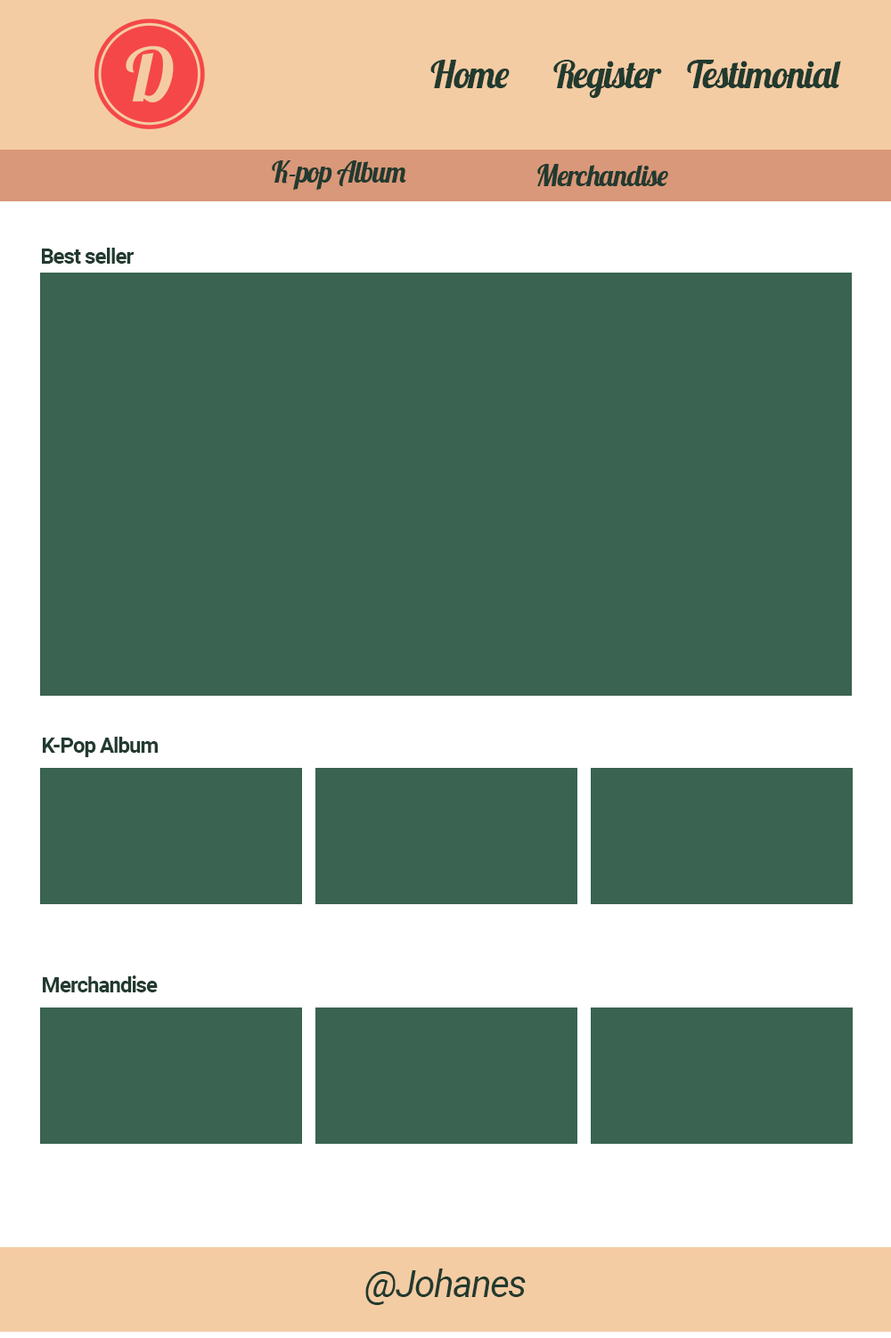
<style>
.page{position:relative;width:891px;height:1338px;background:#3a6351}
.page>*{position:absolute;margin:0}
.t1{font:37.4px "Lobster-Regular";letter-spacing:-0.04em;color:#223a2f}
.t2{font:28.7px "Lobster-Regular";letter-spacing:-0.04em;color:#223a2f}
.t3{font:21.4px "Roboto-Bold";letter-spacing:-0.04em;color:#223a2f}
.t4{font:37.4px "Roboto-Italic";letter-spacing:-0.04em;color:#223a2f}
</style>
<div class="page">
<p class="t1" style="left:430px;top:60px;width:80px;height:28px">Home</p>
<p class="t1" style="left:553px;top:60px;width:109px;height:38px">Register</p>
<p class="t1" style="left:687px;top:60px;width:154px;height:28px">Testimonial</p>
<p class="t2" style="left:272px;top:160px;width:134px;height:30px">K-pop Album</p>
<p class="t2" style="left:537px;top:164px;width:131px;height:22px">Merchandise</p>
<p class="t3" style="left:42px;top:248px;width:92px;height:16px">Best seller</p>
<p class="t3" style="left:43px;top:737px;width:115px;height:20px">K-Pop Album</p>
<p class="t3" style="left:43px;top:976px;width:115px;height:17px">Merchandise</p>
<p class="t4" style="left:365px;top:1269px;width:161px;height:36px">@Johanes</p>
</div>
